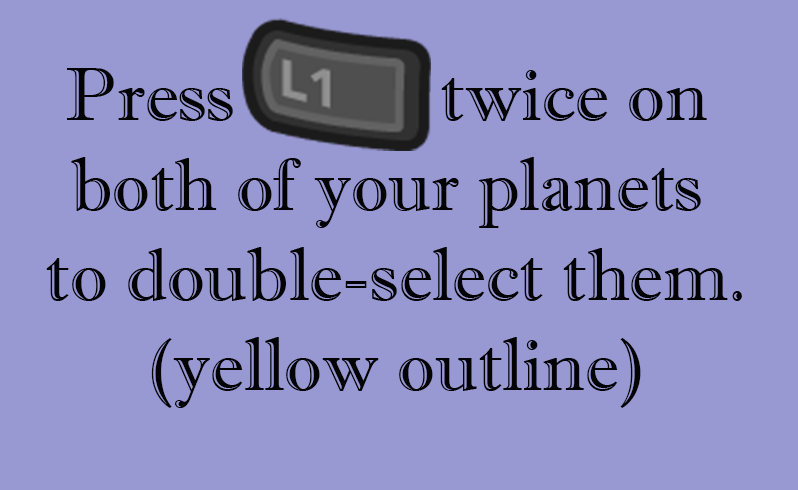
<style>
.page{position:relative;width:798px;height:490px;background:#9898d3}
.page>*{position:absolute;margin:0}
.t1{font:74.8px "ImprintMT-Shadow";color:#030303}
</style>
<div class="page">
<p class="t1" style="left:46px;top:68px;width:696px;height:340px;text-align:center">Press           twice on <br>both of your planets <br>to double-select them.<br>(yellow outline)</p>
</div>
